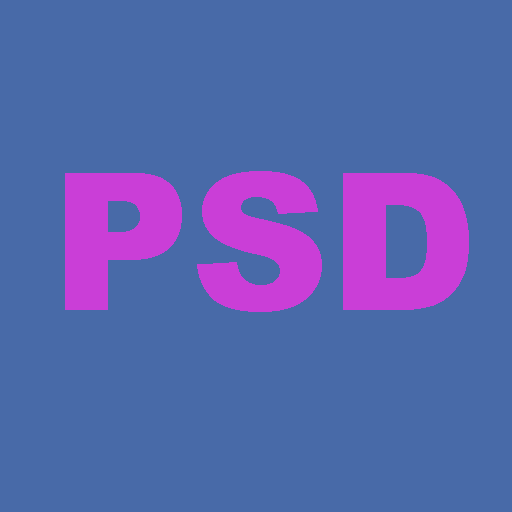
<style>
.page{position:relative;width:512px;height:512px;background:#486aa8}
.page>*{position:absolute;margin:0}
.t1{font:192px "Arial-Black";color:#ca3ed7}
</style>
<div class="page">
<p class="t1" style="left:65px;top:171px;width:404px;height:141px">PSD</p>
</div>
